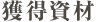
<style>
.page{position:relative;width:96px;height:22px;background:#ffffff}
.page>*{position:absolute;margin:0}
.t1{font:22px "RyuminPro-Heavy";letter-spacing:0.1em;color:#4c4843}
</style>
<div class="page">
<p class="t1" style="left:1px;top:0px;width:93px;height:21px">獲得資材</p>
</div>
